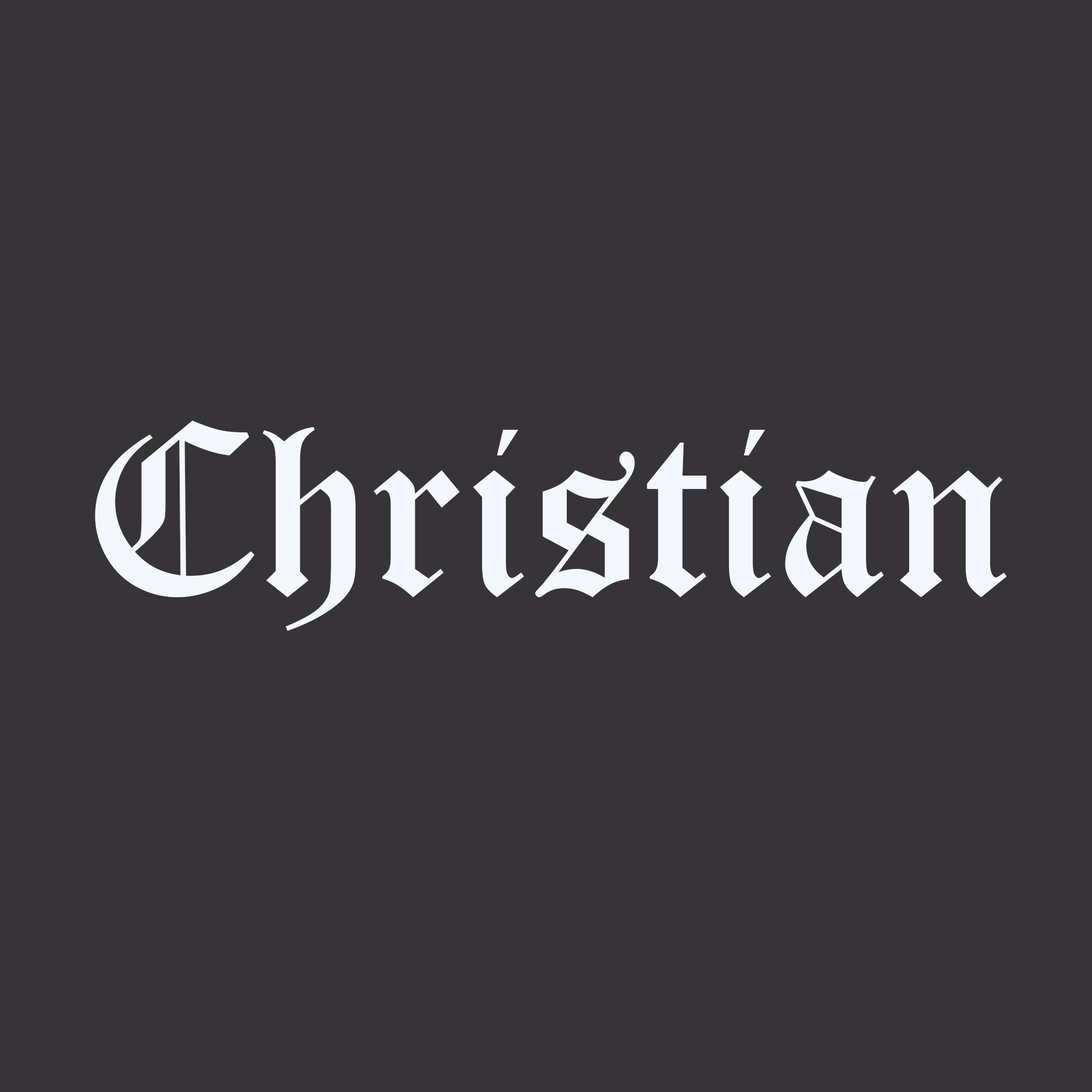
<style>
.page{position:relative;width:1092px;height:1092px;background:#363436}
.page>*{position:absolute;margin:0}
.t1{font:243.1px "OldEnglishTextMT";color:#f3f7fb}
</style>
<div class="page">
<p class="t1" style="left:95px;top:421px;width:912px;height:210px">Christian</p>
</div>
